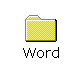
<style>
.page{position:relative;width:80px;height:80px;background:#ffffff}
.page>*{position:absolute;margin:0}
.t1{font:14px "MSReferenceSansSerif";color:#000000}
</style>
<div class="page">
<p class="t1" style="left:23px;top:47px;width:36px;height:11px">Word</p>
</div>
